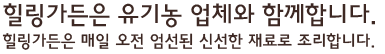
<style>
.page{position:relative;width:385px;height:54px;background:#ffffff}
.page>*{position:absolute;margin:0}
.t1{font:17px/21px "HaanYGodic23";letter-spacing:-0.04em;color:#3d2823}
.t2{font:25px/21px "HaanYGodic23";letter-spacing:-0.04em;color:#3d2823}
</style>
<div class="page">
<p class="t1" style="left:2px;top:3px;width:373px;height:47px"><span class="t2">힐링가든은 유기농 업체와 함께합니다.<br></span>힐링가든은 매일 오전 엄선된 신선한 재료로 조리합니다.</p>
</div>
